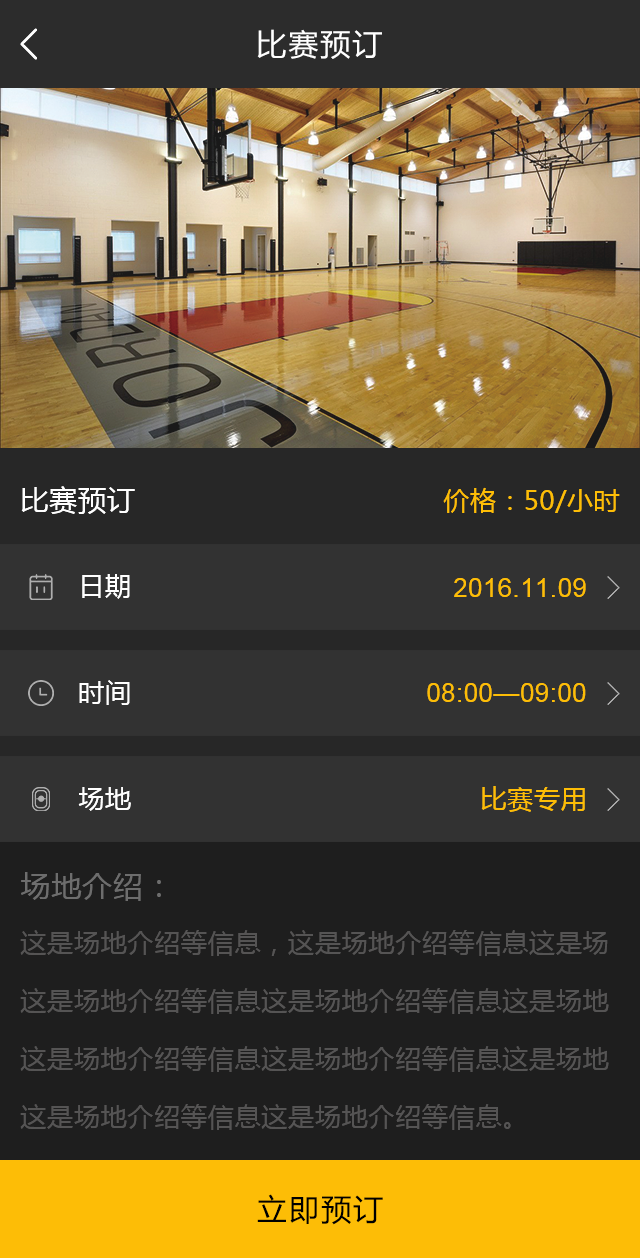
<style>
.page{position:relative;width:640px;height:1258px;background:#1e1e1e}
.page>*{position:absolute;margin:0}
.t1{font:30px "MicrosoftYaHei";letter-spacing:0.07em;color:#ffffff}
.t2{font:28px "MicrosoftYaHei";letter-spacing:0.03em;color:#ffffff}
.t3{font:26px "MicrosoftYaHei";letter-spacing:0.03em;color:#fdbd06}
.t4{font:26px "MicrosoftYaHei";letter-spacing:0.03em;color:#ffffff}
.t5{font:26px "ArialMT";letter-spacing:0.03em;color:#fdbd06}
.t6{font:30px "MicrosoftYaHei";letter-spacing:0.03em;color:#6d6d6d}
.t7{font:26px/58px "MicrosoftYaHei";letter-spacing:0.03em;color:#555454}
.t8{font:30px "MicrosoftYaHei";letter-spacing:0.07em;color:#000000}
</style>
<div class="page">
<p class="t1" style="left:257px;top:29px;width:125px;height:30px">比赛预订</p>
<p class="t2" style="left:21px;top:486px;width:114px;height:28px">比赛预订</p>
<p class="t3" style="left:443px;top:487px;width:177px;height:26px">价格：50/小时</p>
<p class="t4" style="left:82px;top:574px;width:48px;height:25px">日期</p>
<p class="t5" style="left:454px;top:578px;width:132px;height:19px">2016.11.09</p>
<p class="t4" style="left:79px;top:680px;width:51px;height:25px">时间</p>
<p class="t5" style="left:427px;top:683px;width:159px;height:19px">08:00—09:00</p>
<p class="t4" style="left:78px;top:787px;width:53px;height:24px">场地</p>
<p class="t3" style="left:481px;top:786px;width:104px;height:26px">比赛专用</p>
<p class="t6" style="left:21px;top:872px;width:140px;height:29px">场地介绍：</p>
<p class="t7" style="left:20px;top:930px;width:589px;height:200px;text-align:justify">这是场地介绍等信息，这是场地介绍等信息这是场<br>这是场地介绍等信息这是场地介绍等信息这是场地<br>这是场地介绍等信息这是场地介绍等信息这是场地<br>这是场地介绍等信息这是场地介绍等信息。</p>
<p class="t8" style="left:257px;top:1194px;width:126px;height:31px">立即预订</p>
</div>
